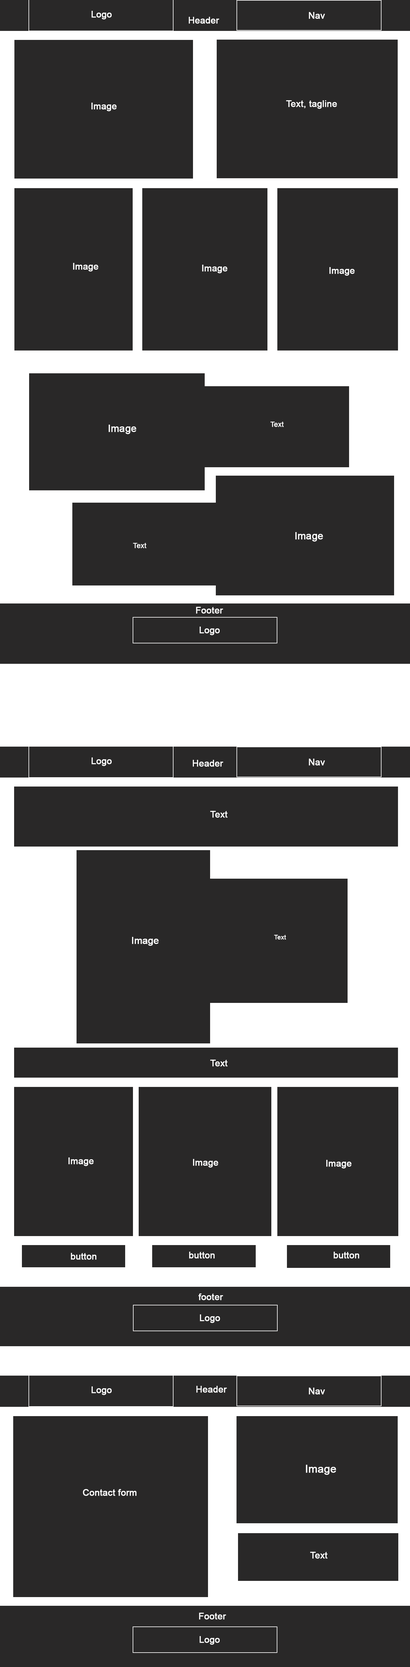
<style>
.page{position:relative;width:410px;height:1667px;background:#292828}
.page>*{position:absolute;margin:0}
.t1{font:9px "ArialMT";color:#ffffff;font-weight:bold}
.t2{font:9.9px "ArialMT";color:#ffffff;font-weight:bold}
.t3{font:6.9px "ArialMT";color:#ffffff;font-weight:bold}
.t4{font:9.5px "ArialMT";color:#ffffff;font-weight:bold}
.t5{font:6.1px "ArialMT";color:#ffffff;font-weight:bold}
.t6{font:10.8px "ArialMT";color:#ffffff;font-weight:bold}
</style>
<div class="page">
<p class="t1" style="left:92px;top:11px;width:20px;height:9px">Logo</p>
<p class="t1" style="left:189px;top:17px;width:30px;height:7px">Header</p>
<p class="t1" style="left:309px;top:12px;width:16px;height:7px">Nav</p>
<p class="t1" style="left:286px;top:100px;width:51px;height:9px">Text, tagline</p>
<p class="t1" style="left:91px;top:103px;width:26px;height:8px">Image</p>
<p class="t1" style="left:73px;top:263px;width:25px;height:9px">Image</p>
<p class="t1" style="left:202px;top:265px;width:25px;height:8px">Image</p>
<p class="t1" style="left:329px;top:267px;width:26px;height:9px">Image</p>
<p class="t2" style="left:109px;top:425px;width:27px;height:9px">Image</p>
<p class="t3" style="left:270px;top:422px;width:14px;height:5px">Text</p>
<p class="t2" style="left:295px;top:532px;width:28px;height:10px">Image</p>
<p class="t3" style="left:133px;top:543px;width:13px;height:5px">Text</p>
<p class="t1" style="left:196px;top:607px;width:27px;height:7px">Footer</p>
<p class="t1" style="left:200px;top:626px;width:20px;height:9px">Logo</p>
<p class="t1" style="left:92px;top:757px;width:20px;height:9px">Logo</p>
<p class="t1" style="left:193px;top:760px;width:30px;height:7px">Header</p>
<p class="t1" style="left:309px;top:758px;width:16px;height:7px">Nav</p>
<p class="t1" style="left:210px;top:811px;width:17px;height:7px">Text</p>
<p class="t4" style="left:132px;top:937px;width:27px;height:9px">Image</p>
<p class="t5" style="left:274px;top:935px;width:12px;height:4px">Text</p>
<p class="t1" style="left:210px;top:1059px;width:17px;height:7px">Text</p>
<p class="t1" style="left:68px;top:1157px;width:26px;height:9px">Image</p>
<p class="t1" style="left:193px;top:1159px;width:25px;height:8px">Image</p>
<p class="t1" style="left:326px;top:1160px;width:25px;height:8px">Image</p>
<p class="t1" style="left:71px;top:1253px;width:25px;height:6px">button</p>
<p class="t1" style="left:189px;top:1251px;width:26px;height:7px">button</p>
<p class="t1" style="left:333px;top:1251px;width:26px;height:7px">button</p>
<p class="t1" style="left:198px;top:1293px;width:25px;height:7px">footer</p>
<p class="t1" style="left:200px;top:1314px;width:20px;height:9px">Logo</p>
<p class="t1" style="left:196px;top:1385px;width:31px;height:7px">Header</p>
<p class="t1" style="left:92px;top:1386px;width:20px;height:9px">Logo</p>
<p class="t1" style="left:309px;top:1387px;width:16px;height:7px">Nav</p>
<p class="t6" style="left:306px;top:1464px;width:30px;height:11px">Image</p>
<p class="t1" style="left:83px;top:1489px;width:54px;height:7px">Contact form</p>
<p class="t1" style="left:310px;top:1551px;width:17px;height:7px">Text</p>
<p class="t1" style="left:199px;top:1612px;width:27px;height:7px">Footer</p>
<p class="t1" style="left:200px;top:1636px;width:20px;height:8px">Logo</p>
</div>
